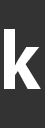
<style>
.page{position:relative;width:45px;height:128px;background:#333333}
.page>*{position:absolute;margin:0}
.t1{font:75px "AdobeGothicStd-Bold";color:#ffffff}
</style>
<div class="page">
<p class="t1" style="left:4px;top:29px;width:37px;height:60px">k</p>
</div>
